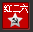
<style>
.page{position:relative;width:33px;height:32px;background:#c50000}
.page>*{position:absolute;margin:0}
.t1{font:10.4px "SimSun";letter-spacing:-0.25em;color:#ffffff}
</style>
<div class="page">
<p class="t1" style="left:4px;top:4px;width:24px;height:9px">红二六</p>
</div>
